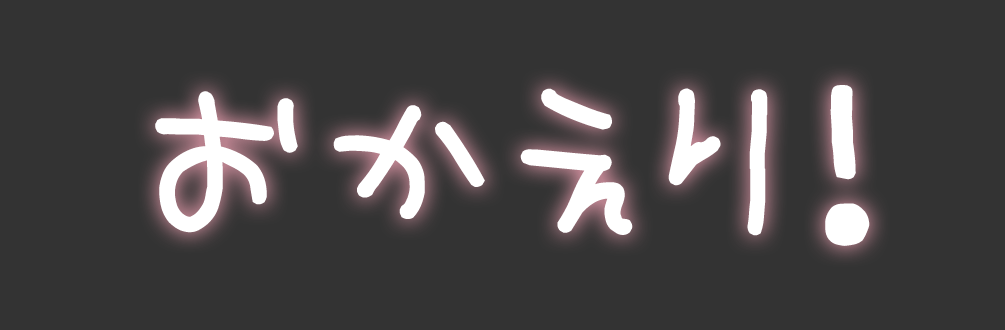
<style>
.page{position:relative;width:1005px;height:330px;background:#333333}
.page>*{position:absolute;margin:0}
.t1{font:195px "GG?îª[?-¶";letter-spacing:0.02em;color:#ffffff}
</style>
<div class="page">
<p class="t1" style="left:155px;top:85px;width:715px;height:161px">おかえり！</p>
</div>
